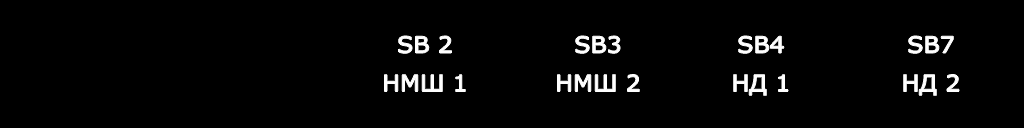
<style>
.page{position:relative;width:1024px;height:128px;background:#000000}
.page>*{position:absolute;margin:0}
.t1{font:38.6px/38.5px "Verdana";color:#ffffff;scale:1.05 1}
</style>
<div class="page">
<p class="t1" style="left:384px;top:36px;width:82px;height:56px;text-align:center">SB 2<br>НМШ 1</p>
<p class="t1" style="left:557px;top:36px;width:83px;height:56px;text-align:center">SB3<br>НМШ 2</p>
<p class="t1" style="left:733px;top:36px;width:55px;height:60px;text-align:center">SB4<br>НД 1</p>
<p class="t1" style="left:903px;top:36px;width:56px;height:60px;text-align:center">SB7<br>НД 2</p>
</div>
